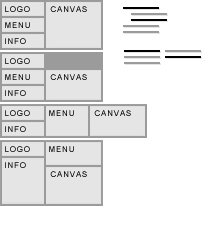
<style>
.page{position:relative;width:223px;height:252px;background:#ffffff}
.page>*{position:absolute;margin:0}
.t1{font:8px "ArialMT";letter-spacing:0.1em}
</style>
<div class="page">
<p class="t1" style="left:5px;top:6px;width:25px;height:6px">LOGO</p>
<p class="t1" style="left:50px;top:6px;width:37px;height:6px">CANVAS</p>
<p class="t1" style="left:5px;top:22px;width:25px;height:6px">MENU</p>
<p class="t1" style="left:5px;top:38px;width:21px;height:6px">INFO</p>
<p class="t1" style="left:5px;top:58px;width:25px;height:6px">LOGO</p>
<p class="t1" style="left:5px;top:74px;width:25px;height:6px">MENU</p>
<p class="t1" style="left:50px;top:74px;width:37px;height:6px">CANVAS</p>
<p class="t1" style="left:5px;top:90px;width:21px;height:6px">INFO</p>
<p class="t1" style="left:5px;top:110px;width:25px;height:6px">LOGO</p>
<p class="t1" style="left:49px;top:110px;width:25px;height:6px">MENU</p>
<p class="t1" style="left:94px;top:110px;width:37px;height:6px">CANVAS</p>
<p class="t1" style="left:5px;top:126px;width:21px;height:6px">INFO</p>
<p class="t1" style="left:5px;top:146px;width:25px;height:6px">LOGO</p>
<p class="t1" style="left:49px;top:146px;width:25px;height:6px">MENU</p>
<p class="t1" style="left:5px;top:162px;width:21px;height:6px">INFO</p>
<p class="t1" style="left:50px;top:171px;width:37px;height:6px">CANVAS</p>
</div>
